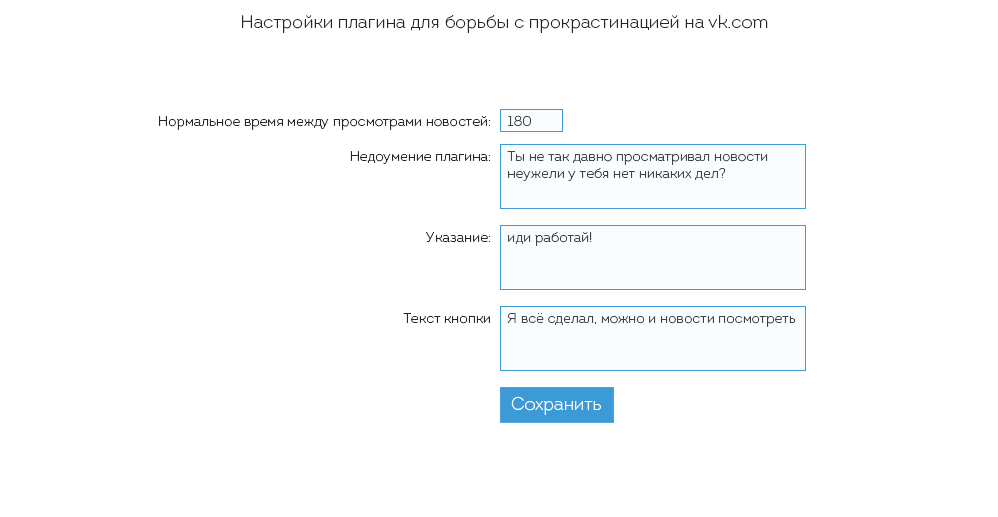
<style>
.page{position:relative;width:998px;height:517px;background:#ffffff}
.page>*{position:absolute;margin:0}
.t1{font:18px "Intro-Light";color:#282424}
.t2{font:14px "Intro-Light";color:#282424}
.t3{font:14px "Intro-Light";color:#424242}
.t4{font:18px "Intro-Light";color:#ffffff}
</style>
<div class="page">
<p class="t1" style="left:242px;top:15px;width:526px;height:18px">Настройки плагина для борьбы с прокрастинацией на vk.com</p>
<p class="t2" style="left:159px;top:116px;width:332px;height:14px">Нормальное время между просмотрами новостей:</p>
<p class="t3" style="left:508px;top:115px;width:23px;height:11px">180</p>
<p class="t2" style="left:350px;top:151px;width:141px;height:13px">Недоумение плагина:</p>
<p class="t3" style="left:507px;top:151px;width:261px;height:30px">Ты не так давно просматривал новости<br>неужели у тебя нет никаких дел?</p>
<p class="t2" style="left:426px;top:232px;width:65px;height:11px">Указание:</p>
<p class="t3" style="left:508px;top:232px;width:84px;height:14px">иди работай!</p>
<p class="t2" style="left:403px;top:313px;width:87px;height:11px">Текст кнопки</p>
<p class="t3" style="left:507px;top:313px;width:289px;height:14px">Я всё сделал, можно и новости посмотреть</p>
<p class="t4" style="left:511px;top:396px;width:90px;height:19px">Сохранить</p>
</div>
